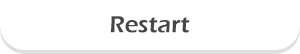
<style>
.page{position:relative;width:300px;height:54px;background:#ffffff}
.page>*{position:absolute;margin:0}
.t1{font:24px "ErasITC-Demi";color:#464646}
</style>
<div class="page">
<p class="t1" style="left:110px;top:16px;width:80px;height:17px">Restart</p>
</div>
